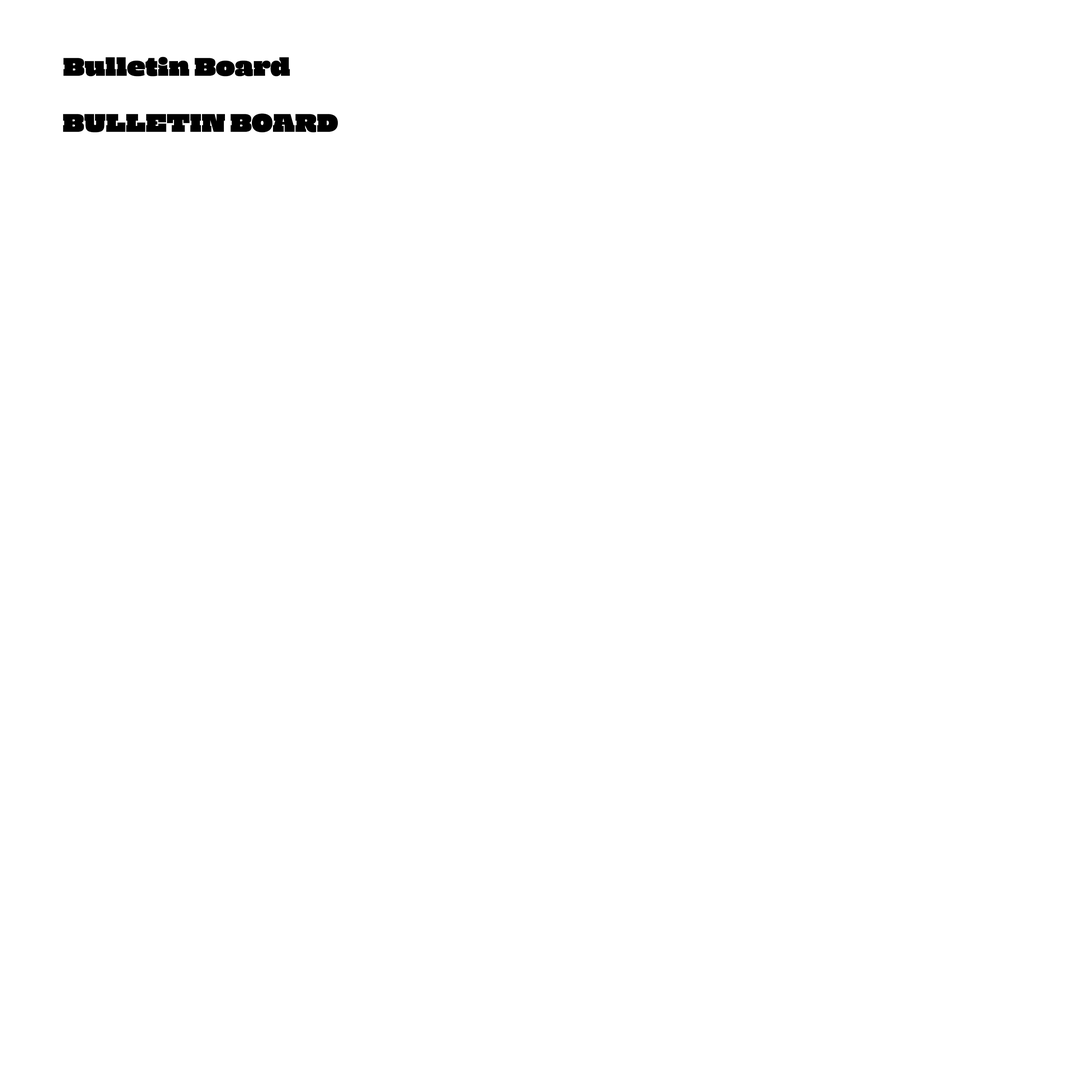
<style>
.page{position:relative;width:1092px;height:1092px;background:#ffffff}
.page>*{position:absolute;margin:0}
.t1{font:26.2px "MightySlab-One";color:#000000}
</style>
<div class="page">
<p class="t1" style="left:63px;top:57px;width:227px;height:19px">Bulletin Board</p>
<p class="t1" style="left:63px;top:114px;width:275px;height:18px">BULLETIN BOARD</p>
</div>
